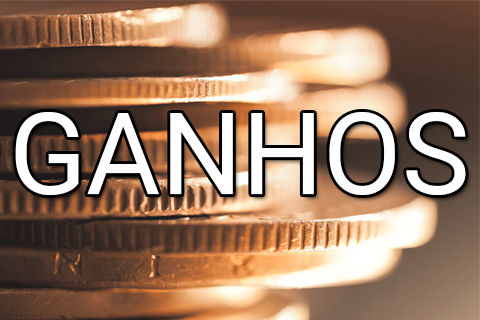
<style>
.page{position:relative;width:480px;height:320px}
.page>*{position:absolute;margin:0}
.t1{font:114px "Roboto-Regular";color:#ffffff}
</style>
<div class="page">
<p class="t1" style="left:15px;top:112px;width:451px;height:83px">GANHOS</p>
</div>
